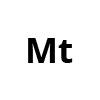
<style>
.page{position:relative;width:100px;height:100px;background:#ffffff}
.page>*{position:absolute;margin:0}
.t1{font:35px "OpenSans-Bold";color:#000000}
</style>
<div class="page">
<p class="t1" style="left:28px;top:38px;width:45px;height:25px">Mt</p>
</div>
